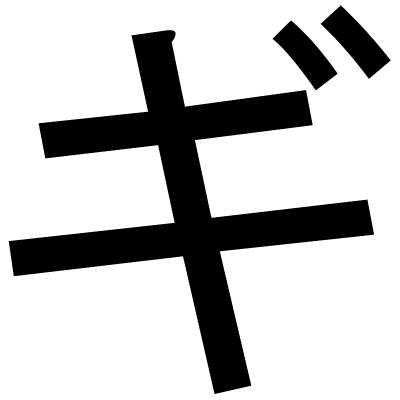
<style>
.page{position:relative;width:400px;height:400px;background:#ffffff}
.page>*{position:absolute;margin:0}
.t1{font:424.8px "MS-PGothic";color:#000000}
</style>
<div class="page">
<p class="t1" style="left:8px;top:5px;width:383px;height:389px">ギ</p>
</div>
